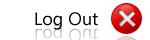
<style>
.page{position:relative;width:150px;height:40px;background:#ffffff}
.page>*{position:absolute;margin:0}
.t1{font:18px "SegoeUI";color:#000000}
</style>
<div class="page">
<p class="t1" style="left:35px;top:12px;width:63px;height:18px">Log Out</p>
</div>
